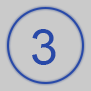
<style>
.page{position:relative;width:91px;height:91px;background:#cacaca}
.page>*{position:absolute;margin:0}
.t1{font:50px "ArialMT";color:#2849a8}
</style>
<div class="page">
<p class="t1" style="left:32px;top:29px;width:24px;height:36px">3</p>
</div>
